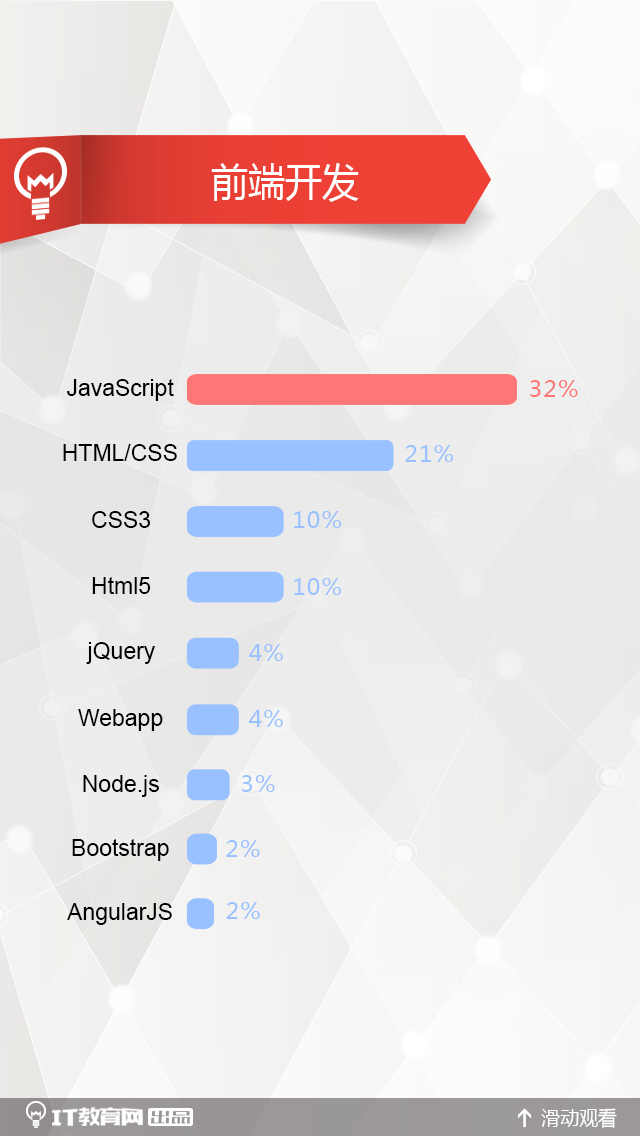
<style>
.page{position:relative;width:640px;height:1136px}
.page>*{position:absolute;margin:0}
.t1{font:40px "MicrosoftYaHei";color:#ffffff;scale:0.93 1}
.t2{font:23px "ArialMT";color:#000000}
.t3{font:23px "MicrosoftYaHei";letter-spacing:0.05em;color:#ff7676}
.t4{font:23px "MicrosoftYaHei";letter-spacing:0.05em;color:#99c0ff}
.t5{font:20.2px "MicrosoftYaHei";color:#ffffff;scale:0.94 1}
</style>
<div class="page">
<p class="t1" style="left:211px;top:163px;width:148px;height:39px">前端开发</p>
<p class="t2" style="left:67px;top:379px;width:107px;height:22px">JavaScript</p>
<p class="t3" style="left:530px;top:380px;width:48px;height:17px">32%</p>
<p class="t2" style="left:63px;top:444px;width:114px;height:17px">HTML/CSS</p>
<p class="t4" style="left:405px;top:445px;width:48px;height:17px">21%</p>
<p class="t2" style="left:92px;top:511px;width:59px;height:17px">CSS3</p>
<p class="t4" style="left:294px;top:511px;width:47px;height:17px">10%</p>
<p class="t2" style="left:92px;top:577px;width:59px;height:17px">Html5</p>
<p class="t4" style="left:294px;top:578px;width:47px;height:17px">10%</p>
<p class="t2" style="left:86px;top:642px;width:69px;height:22px">jQuery</p>
<p class="t4" style="left:249px;top:644px;width:34px;height:17px">4%</p>
<p class="t2" style="left:78px;top:709px;width:85px;height:22px">Webapp</p>
<p class="t4" style="left:249px;top:710px;width:34px;height:17px">4%</p>
<p class="t2" style="left:83px;top:775px;width:76px;height:22px">Node.js</p>
<p class="t4" style="left:241px;top:775px;width:34px;height:17px">3%</p>
<p class="t2" style="left:72px;top:839px;width:97px;height:22px">Bootstrap</p>
<p class="t4" style="left:226px;top:840px;width:34px;height:17px">2%</p>
<p class="t2" style="left:67px;top:903px;width:105px;height:22px">AngularJS</p>
<p class="t4" style="left:226px;top:902px;width:34px;height:17px">2%</p>
<p class="t5" style="left:541px;top:1108px;width:76px;height:20px">滑动观看</p>
</div>
